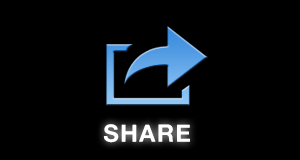
<style>
.page{position:relative;width:300px;height:160px;background:#000000}
.page>*{position:absolute;margin:0}
.t1{font:24px "AlteHaasGrotesk_Bold";letter-spacing:0.05em;color:#ffffff}
</style>
<div class="page">
<p class="t1" style="left:103px;top:124px;width:87px;height:19px">SHARE</p>
</div>
